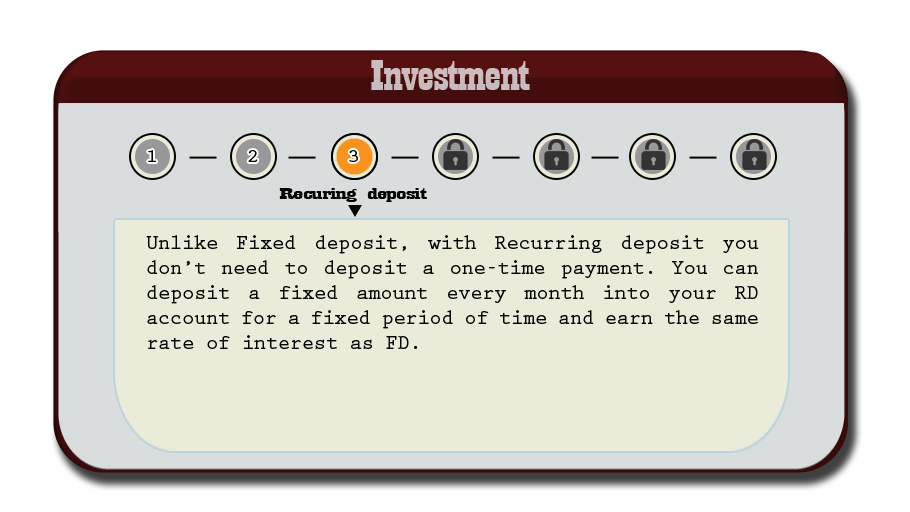
<style>
.page{position:relative;width:910px;height:512px;background:#eaebd8}
.page>*{position:absolute;margin:0}
.t1{font:44.6px "Playbill";letter-spacing:-0.025em;color:#c8bbbe;scale:1.61 1}
.t2{font:18.8px "PrestigeEliteStd-Bd";letter-spacing:-0.025em;color:#020201;scale:1.18 1}
.t3{font:17.3px "Playbill";letter-spacing:-0.025em;color:#020201;scale:2.47 1}
.t4{font:20.8px "PrestigeEliteStd-Bd";letter-spacing:-0.025em;color:#020201}
</style>
<div class="page">
<p class="t1" style="left:371px;top:60px;width:159px;height:30px">Investment</p>
<p class="t2" style="left:148px;top:150px;width:8px;height:12px">1</p>
<p class="t2" style="left:248px;top:150px;width:10px;height:12px">2</p>
<p class="t2" style="left:349px;top:150px;width:9px;height:12px">3</p>
<p class="t3" style="left:279px;top:188px;width:148px;height:14px">Recuring deposit</p>
<p class="t4" style="left:146px;top:235px;width:613px;height:114px;text-align:justify">Unlike Fixed deposit, with Recurring deposit you don’t need to deposit a one-time payment. You can deposit a fixed amount every month into your RD account for a fixed period of time and earn the same rate of interest as FD.</p>
</div>
